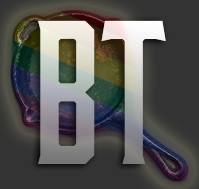
<style>
.page{position:relative;width:199px;height:189px;background:#333333}
.page>*{position:absolute;margin:0}
.t1{font:207px "Moonshiner-Regular"}
</style>
<div class="page">
<p class="t1" style="left:38px;top:20px;width:128px;height:144px">BT</p>
<p class="t1" style="left:38px;top:20px;width:128px;height:144px">BT</p>
</div>
